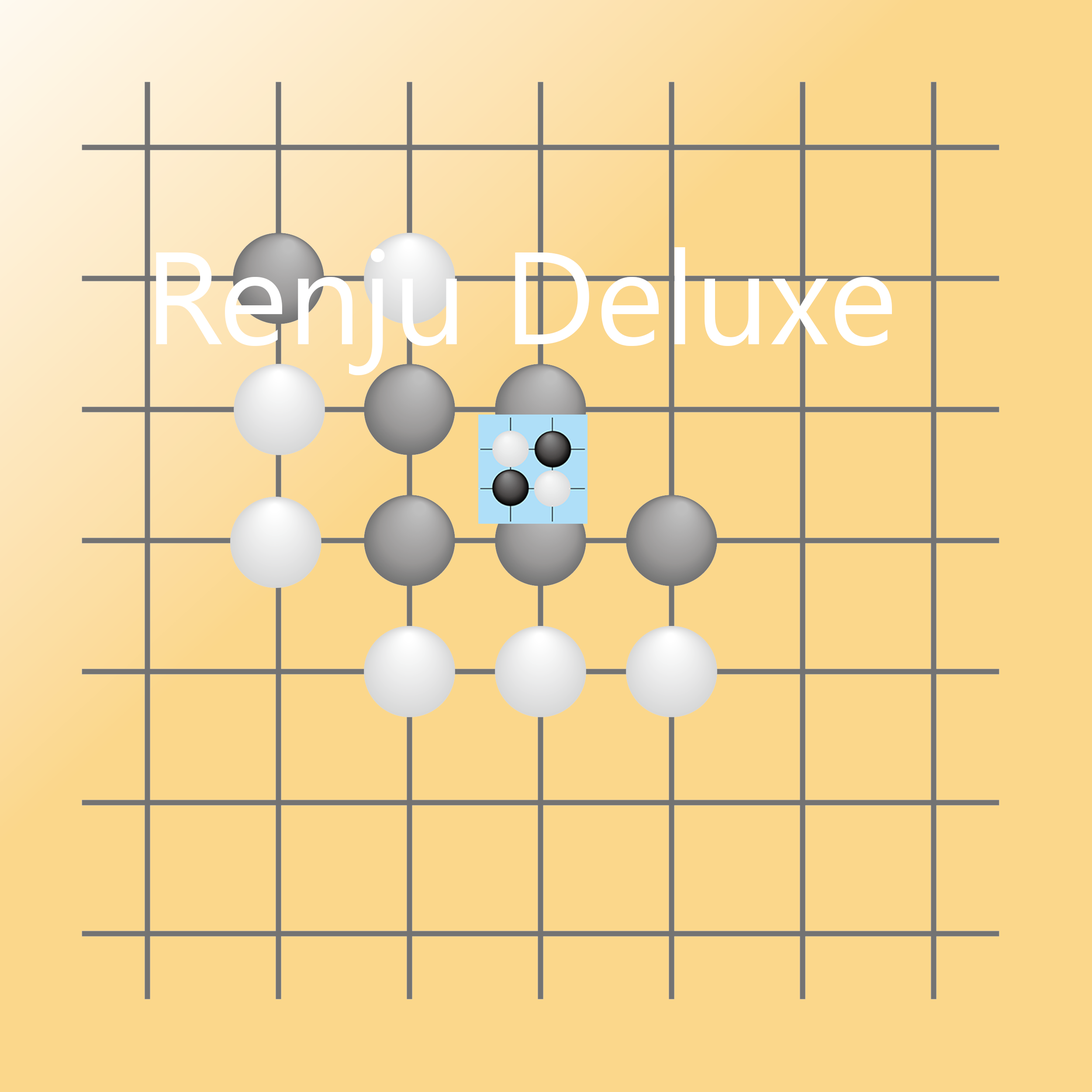
<style>
.page{position:relative;width:1092px;height:1092px;background:#fbd78b}
.page>*{position:absolute;margin:0}
.t1{font:131px "SegoeUI";color:#ffffff}
</style>
<div class="page">
<p class="t1" style="left:156px;top:247px;width:736px;height:128px">Renju Deluxe</p>
</div>
